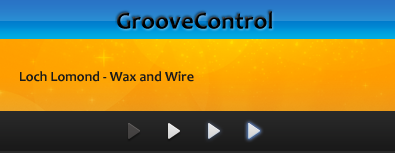
<style>
.page{position:relative;width:395px;height:153px}
.page>*{position:absolute;margin:0}
.t1{font:24.8px "Candara-Bold";color:#000000}
.t2{font:14px "Candara-Bold";color:#1b1b1b}
</style>
<div class="page">
<p class="t1" style="left:117px;top:11px;width:155px;height:18px">GrooveControl</p>
<p class="t2" style="left:20px;top:71px;width:174px;height:11px">Loch Lomond - Wax and Wire</p>
</div>
